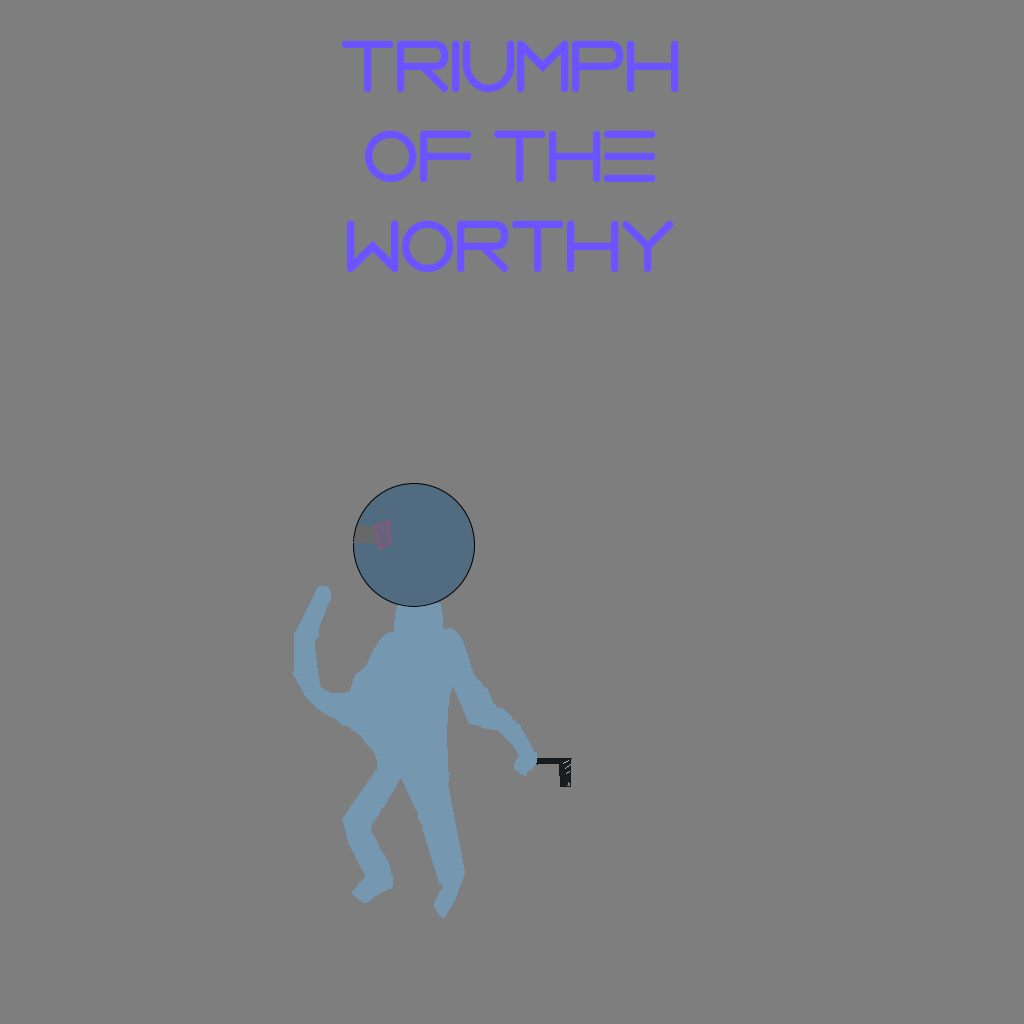
<style>
.page{position:relative;width:1024px;height:1024px;background:#7e7e7e}
.page>*{position:absolute;margin:0}
.t1{font:75px "VerminVibes2Soft";color:#6b53ff}
</style>
<div class="page">
<p class="t1" style="left:342px;top:40px;width:337px;height:232px;text-align:center">Triumph<br>of the Worthy</p>
</div>
